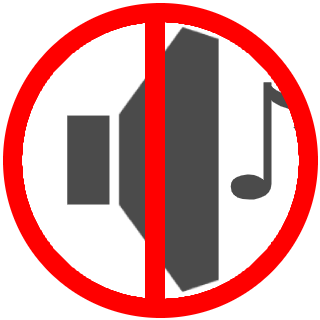
<style>
.page{position:relative;width:320px;height:320px;background:#ffffff}
.page>*{position:absolute;margin:0}
.t1{font:160px "DejaVuSans";color:#4b4b4b}
</style>
<div class="page">
<p class="t1" style="left:230px;top:82px;width:76px;height:118px">♪</p>
</div>
